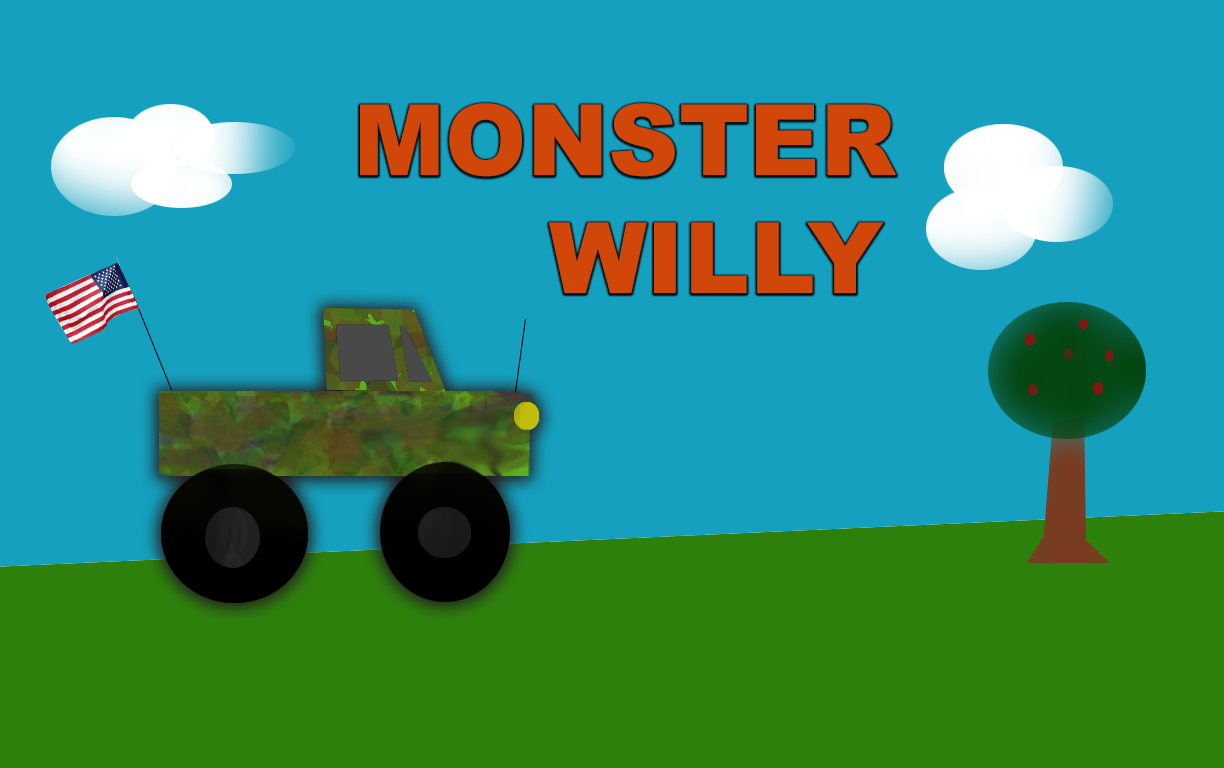
<style>
.page{position:relative;width:1224px;height:768px;background:#14a0be}
.page>*{position:absolute;margin:0}
.t1{font:98.5px "Arial-Black";color:#d14609}
</style>
<div class="page">
<p class="t1" style="left:360px;top:103px;width:537px;height:190px">MONSTER<br>      WILLY</p>
</div>
